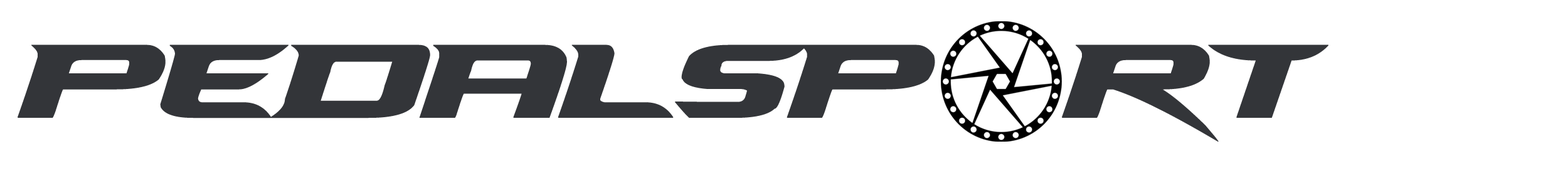
<style>
.page{position:relative;width:1568px;height:188px;background:#ffffff}
.page>*{position:absolute;margin:0}
.t1{font:202.8px "NHLDucks";color:#333539}
</style>
<div class="page">
<p class="t1" style="left:18px;top:45px;width:917px;height:74px">Pedalsp</p>
<p class="t1" style="left:1062px;top:45px;width:266px;height:97px">rt</p>
</div>
